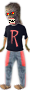
<style>
.page{position:relative;width:30px;height:90px;background:#ffffff}
.page>*{position:absolute;margin:0}
.t1{font:24px "SpaceToaster";color:#fa7474}
</style>
<div class="page">
<p class="t1" style="left:10px;top:30px;width:9px;height:17px">R</p>
</div>
